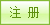
<style>
.page{position:relative;width:50px;height:25px}
.page>*{position:absolute;margin:0}
.t1{font:12px "SimSun";color:#5e9110}
</style>
<div class="page">
<p class="t1" style="left:10px;top:6px;width:29px;height:12px">注 册</p>
</div>
